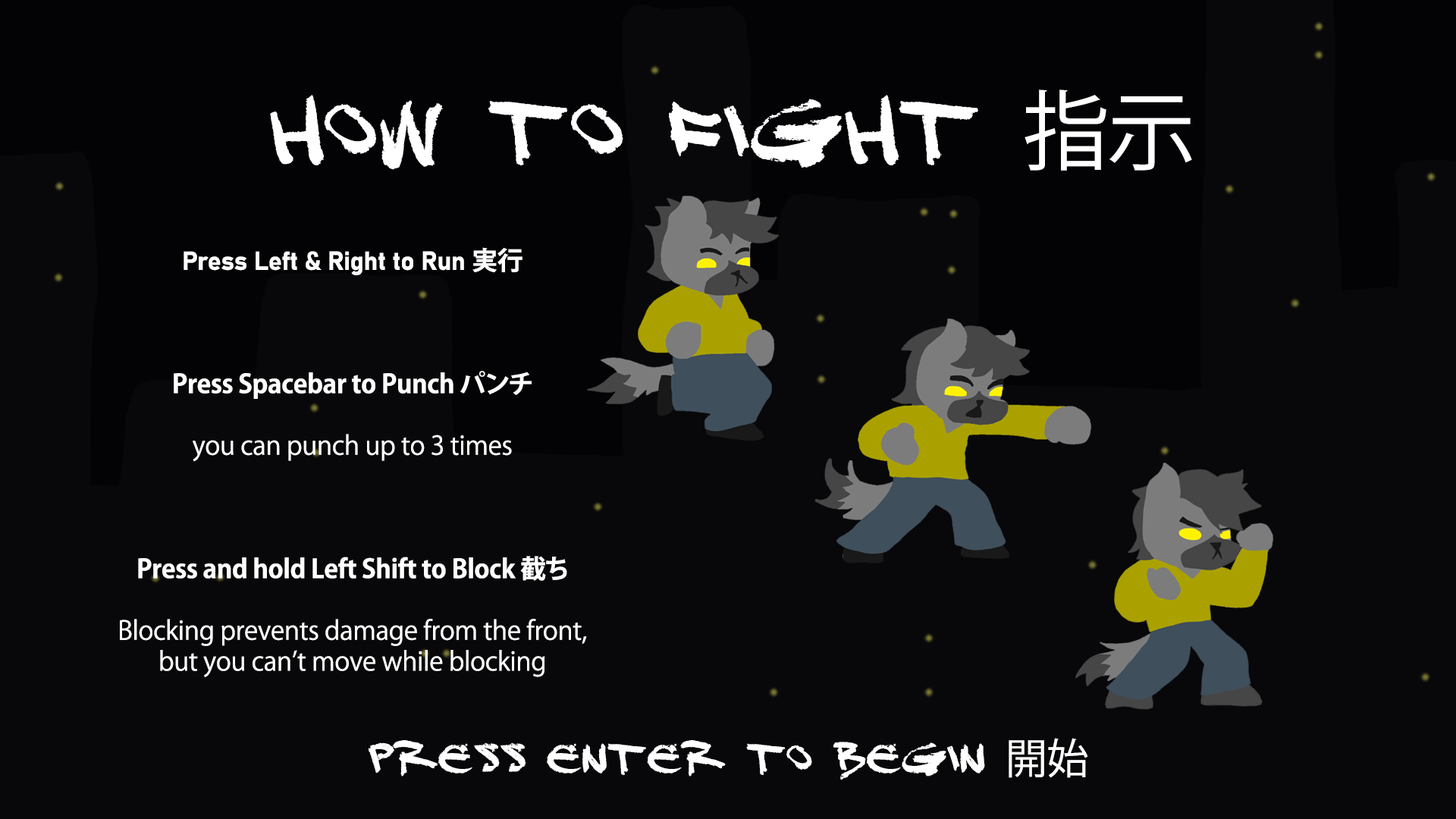
<style>
.page{position:relative;width:1456px;height:819px;background:#08070a}
.page>*{position:absolute;margin:0}
.t1{font:86.5px "DJ-Gross";letter-spacing:-0.01em;color:#ffffff}
.t2{font:86.5px "KozGoPr6N-Regular";letter-spacing:-0.01em;color:#ffffff}
.t3{font:25.7px "KozGoPr6N-Regular";letter-spacing:-0.01em;color:#ffffff}
.t4{font:25.7px "Bahnschrift-Bold";letter-spacing:-0.01em;color:#ffffff}
.t5{font:25.7px "KozGoPr6N-Bold";letter-spacing:-0.01em;color:#ffffff}
.t6{font:41.8px "DJ-Gross";letter-spacing:-0.01em;color:#ffffff}
.t7{font:41.8px "KozGoPr6N-Regular";letter-spacing:-0.01em;color:#ffffff}
</style>
<div class="page">
<p class="t1" style="left:270px;top:89px;width:922px;height:82px">HOW TO FIGHT <span class="t2">指示</span></p>
<p class="t3" style="left:120px;top:247px;width:467px;height:430px;text-align:center"><span class="t4">Press Left &amp; Right to Run </span><span class="t5">実行<br><br><br><br>Press Spacebar to Punch パンチ<br></span><br>you can punch up to 3 times<br><br><br><span class="t5"><br>Press and hold Left Shift to Block 截ち<br></span><br>Blocking prevents damage from the front,<br>but you can’t move while blocking</p>
<p class="t6" style="left:369px;top:738px;width:719px;height:42px">PRESS ENTER TO BEGIN <span class="t7">開始</span></p>
</div>
